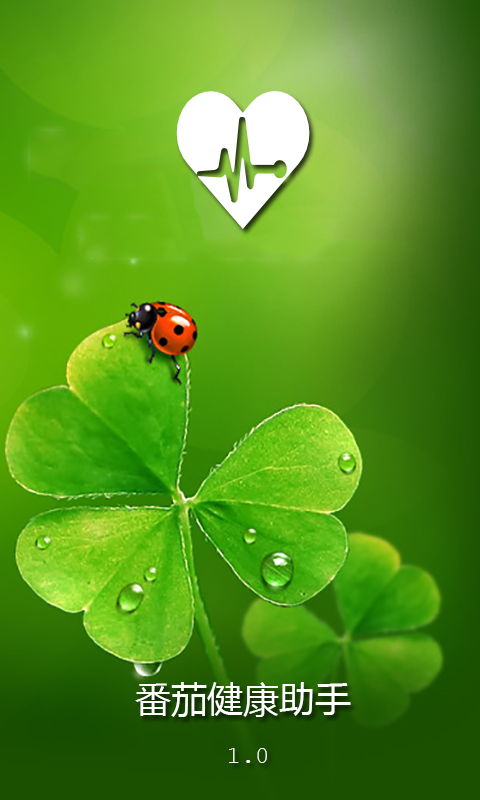
<style>
.page{position:relative;width:480px;height:800px}
.page>*{position:absolute;margin:0}
.t1{font:36px "MicrosoftYaHei";color:#ffffff}
.t2{font:24px "CourierNewPSMT";color:#ffffff}
</style>
<div class="page">
<p class="t1" style="left:135px;top:682px;width:216px;height:81px;text-align:center">番茄健康助手 <br><span class="t2">1.0</span></p>
</div>
